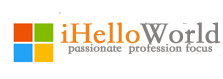
<style>
.page{position:relative;width:223px;height:79px;background:#ffffff}
.page>*{position:absolute;margin:0}
.t1{font:30px "STSong";color:#f08319;font-weight:bold}
.t2{font:30px "STSong";color:#83807f;font-weight:bold}
.t3{font:12px "STSong";color:#898785;font-weight:bold}
</style>
<div class="page">
<p class="t1" style="left:60px;top:22px;width:161px;height:22px">iHello<span class="t2">World</span></p>
<p class="t3" style="left:68px;top:43px;width:145px;height:12px">passionate  profession focus</p>
</div>
